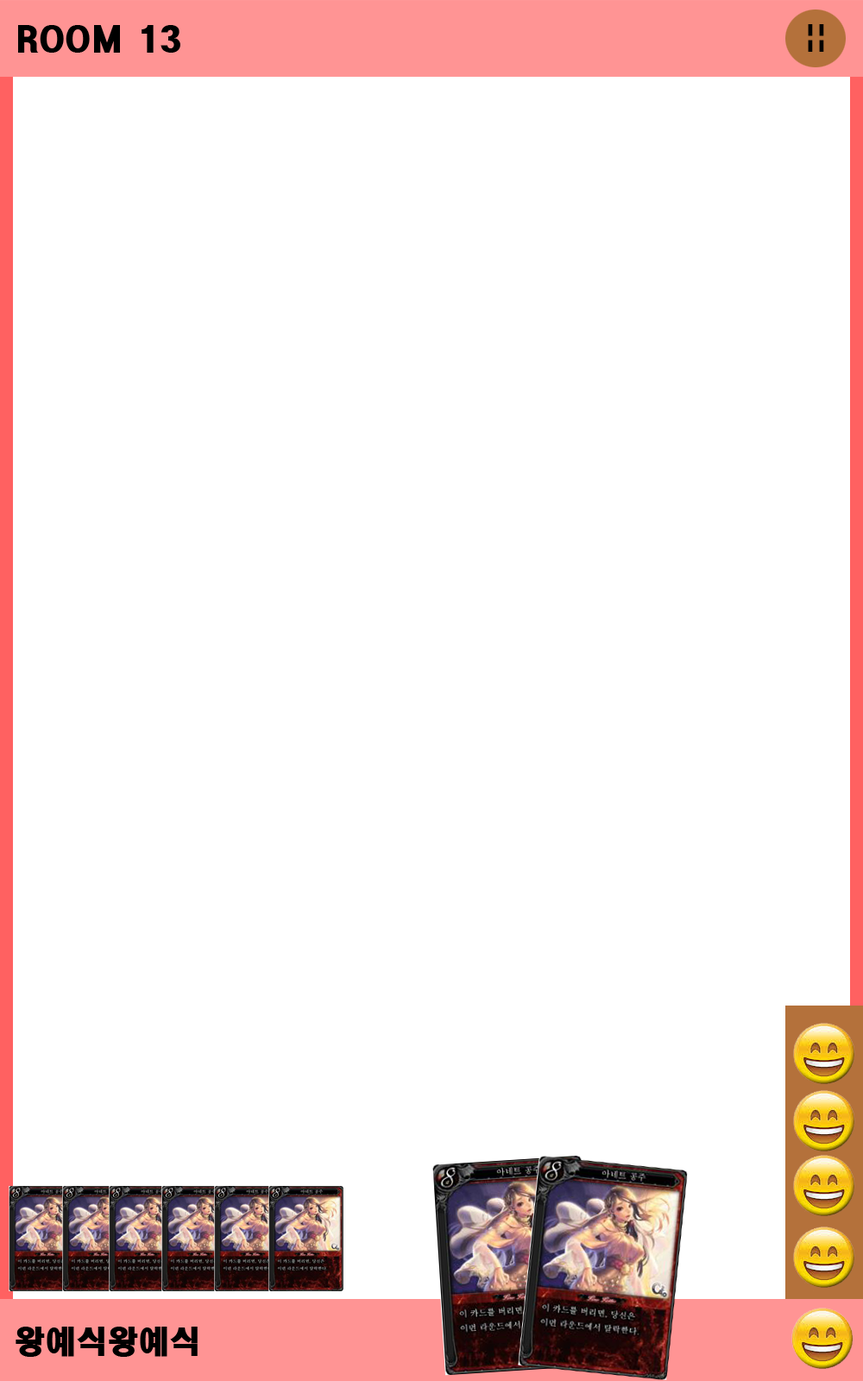
<style>
.page{position:relative;width:863px;height:1381px;background:#ffffff}
.page>*{position:absolute;margin:0}
.t1{font:31.1px "HeadlineR-HM";color:#000000}
</style>
<div class="page">
<p class="t1" style="left:18px;top:25px;width:162px;height:28px">ROOM 13</p>
<p class="t1" style="left:16px;top:1327px;width:182px;height:30px">왕예식왕예식</p>
</div>
